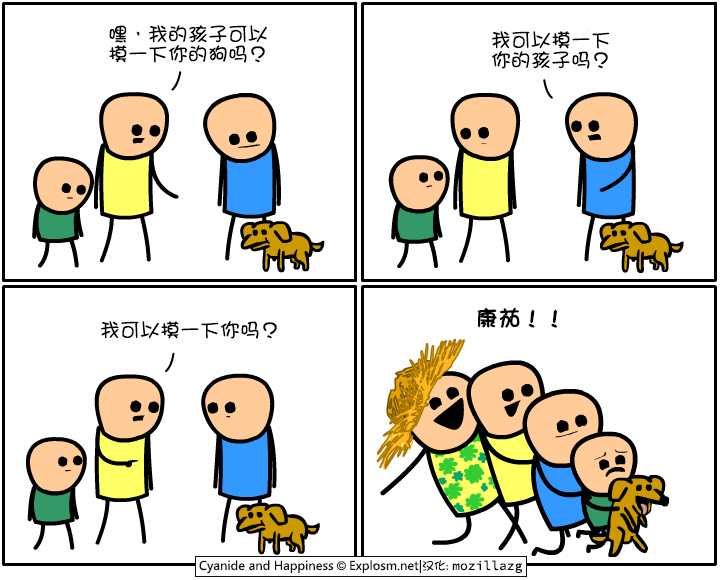
<style>
.page{position:relative;width:720px;height:580px;background:#ffffff}
.page>*{position:absolute;margin:0}
.t1{font:20px/20px "DFGirl";color:#000000}
.t2{font:22px "DFGirl";color:#000000;font-weight:bold}
.t3{font:20px "DFGirl";color:#000000}
</style>
<div class="page">
<p class="t1" style="left:109px;top:25px;width:158px;height:38px">嘿，我的孩子可以<br>摸一下你的狗吗？</p>
<p class="t1" style="left:491px;top:31px;width:119px;height:38px">我可以摸一下<br>你的孩子吗？</p>
<p class="t2" style="left:477px;top:307px;width:81px;height:21px">康茄！！</p>
<p class="t3" style="left:100px;top:321px;width:177px;height:18px">我可以摸一下你吗？</p>
</div>
